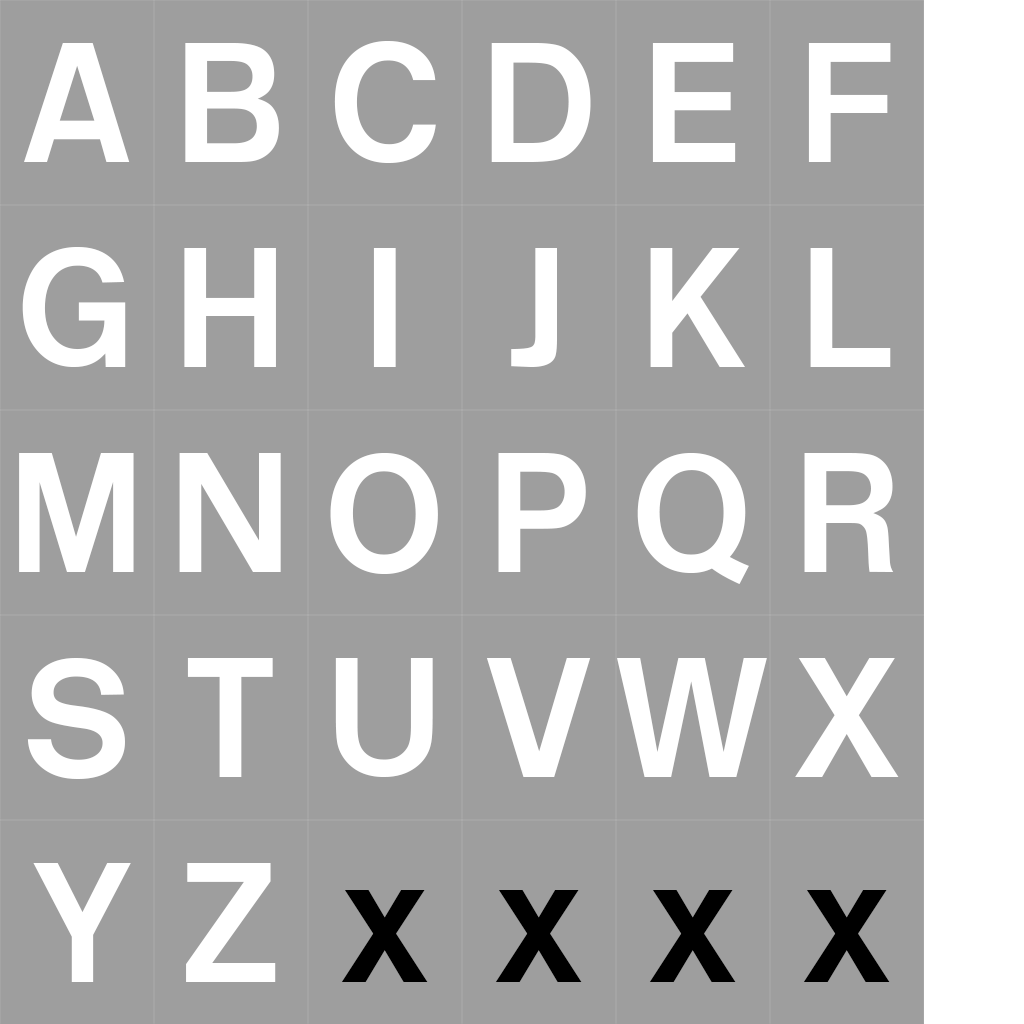
<style>
.page{position:relative;width:1024px;height:1024px;background:#9e9e9e}
.page>*{position:absolute;margin:0}
.t1{font:180px "BritishRailLightNormal";color:#ffffff}
.t2{font:180px "BritishRailLightNormal";color:#000000}
</style>
<div class="page">
<p class="t1" style="left:334px;top:41px;width:102px;height:122px">C</p>
<p class="t1" style="left:24px;top:43px;width:106px;height:119px">A</p>
<p class="t1" style="left:185px;top:43px;width:94px;height:119px">B</p>
<p class="t1" style="left:491px;top:43px;width:100px;height:119px">D</p>
<p class="t1" style="left:652px;top:43px;width:84px;height:119px">E</p>
<p class="t1" style="left:808px;top:43px;width:83px;height:119px">F</p>
<p class="t1" style="left:22px;top:247px;width:104px;height:120px">G</p>
<p class="t1" style="left:184px;top:248px;width:92px;height:119px">H</p>
<p class="t1" style="left:373px;top:248px;width:23px;height:119px">I</p>
<p class="t1" style="left:511px;top:248px;width:46px;height:119px">J</p>
<p class="t1" style="left:650px;top:248px;width:95px;height:119px">K</p>
<p class="t1" style="left:810px;top:248px;width:81px;height:119px">L</p>
<p class="t1" style="left:19px;top:453px;width:115px;height:119px">M</p>
<p class="t1" style="left:179px;top:453px;width:102px;height:119px">N</p>
<p class="t1" style="left:330px;top:453px;width:108px;height:121px">O</p>
<p class="t1" style="left:498px;top:453px;width:88px;height:119px">P</p>
<p class="t1" style="left:637px;top:453px;width:112px;height:131px">Q</p>
<p class="t1" style="left:804px;top:453px;width:90px;height:119px">R</p>
<p class="t1" style="left:27px;top:658px;width:98px;height:121px">S</p>
<p class="t1" style="left:187px;top:658px;width:86px;height:119px">T</p>
<p class="t1" style="left:335px;top:658px;width:98px;height:119px">U</p>
<p class="t1" style="left:486px;top:658px;width:105px;height:119px">V</p>
<p class="t1" style="left:617px;top:658px;width:150px;height:119px">W</p>
<p class="t1" style="left:795px;top:658px;width:104px;height:119px">X</p>
<p class="t1" style="left:33px;top:863px;width:98px;height:119px">Y</p>
<p class="t1" style="left:186px;top:863px;width:90px;height:119px">Z</p>
<p class="t2" style="left:341px;top:890px;width:87px;height:92px">x</p>
<p class="t2" style="left:495px;top:890px;width:87px;height:92px">x</p>
<p class="t2" style="left:649px;top:890px;width:87px;height:92px">x</p>
<p class="t2" style="left:803px;top:890px;width:87px;height:92px">x</p>
</div>
